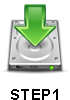
<style>
.page{position:relative;width:70px;height:100px;background:#ffffff}
.page>*{position:absolute;margin:0}
.t1{font:15px "Arial-BoldMT";letter-spacing:0.03em;color:#000000}
</style>
<div class="page">
<p class="t1" style="left:11px;top:89px;width:47px;height:11px">STEP1</p>
</div>
